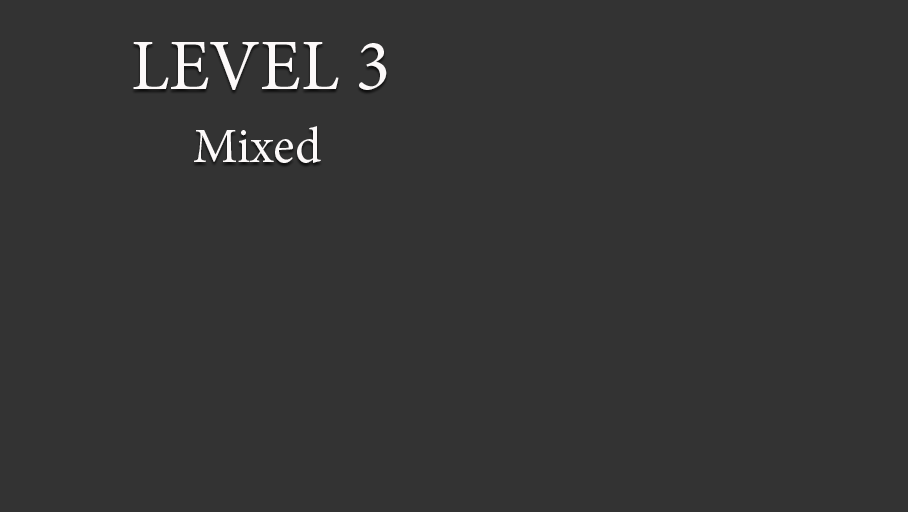
<style>
.page{position:relative;width:908px;height:512px;background:#333333}
.page>*{position:absolute;margin:0}
.t1{font:72px "MinionPro-Regular";color:#fcf9f9}
.t2{font:50px "MinionPro-Regular";color:#fcf9f9}
</style>
<div class="page">
<p class="t1" style="left:133px;top:42px;width:254px;height:48px">LEVEL 3</p>
<p class="t2" style="left:194px;top:126px;width:127px;height:37px">Mixed</p>
</div>
